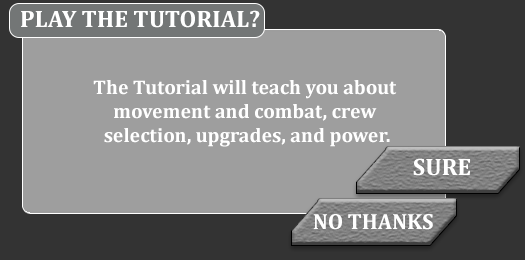
<style>
.page{position:relative;width:525px;height:260px;background:#9e9e9e}
.page>*{position:absolute;margin:0}
.t1{font:24px "Cambria-Bold";color:#ffffff}
.t2{font:20px "Cambria-Bold";color:#ffffff}
.t3{font:22px "Cambria-Bold";color:#ffffff}
</style>
<div class="page">
<p class="t1" style="left:21px;top:10px;width:239px;height:18px">PLAY THE TUTORIAL?</p>
<p class="t2" style="left:93px;top:80px;width:304px;height:67px;text-align:center">The Tutorial will teach you about <br>movement and combat, crew <br>selection, upgrades, and power.</p>
<p class="t1" style="left:413px;top:158px;width:57px;height:18px">SURE</p>
<p class="t3" style="left:313px;top:214px;width:120px;height:16px">NO THANKS</p>
</div>
